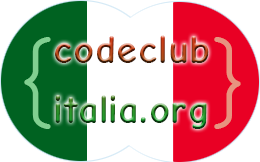
<style>
.page{position:relative;width:260px;height:162px;background:#ffffff}
.page>*{position:absolute;margin:0}
.t1{font:100px "ComicNeue-Regular";color:#81d091}
.t2{font:40px "ComicNeue-Bold"}
.t3{font:100px "ComicNeue-Regular";color:#e79380}
</style>
<div class="page">
<p class="t1" style="left:24px;top:37px;width:27px;height:92px">{</p>
<p class="t2" style="left:55px;top:35px;width:154px;height:94px">codeclub<br><br>italia.org</p>
<p class="t3" style="left:214px;top:37px;width:27px;height:92px">}</p>
</div>
